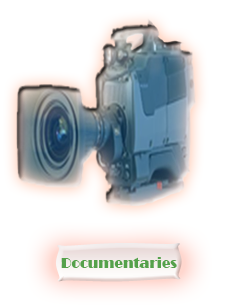
<style>
.page{position:relative;width:235px;height:305px;background:#ffffff}
.page>*{position:absolute;margin:0}
.t1{font:14px "Broadway";color:#55a14b}
</style>
<div class="page">
<p class="t1" style="left:61px;top:257px;width:116px;height:11px">Documentaries</p>
</div>
